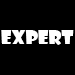
<style>
.page{position:relative;width:75px;height:75px;background:#000000}
.page>*{position:absolute;margin:0}
.t1{font:19px "ShowcardGothic-Reg";color:#ffffff}
</style>
<div class="page">
<p class="t1" style="left:1px;top:30px;width:73px;height:15px">EXPERT</p>
</div>
